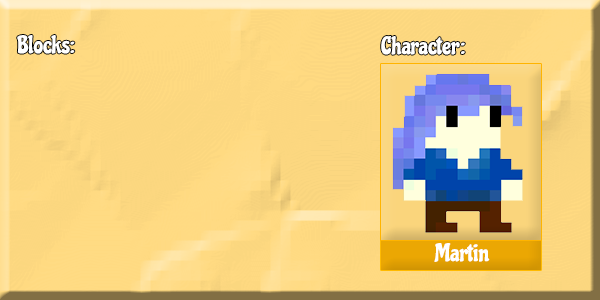
<style>
.page{position:relative;width:600px;height:300px}
.page>*{position:absolute;margin:0}
.t1{font:24.2px "Chicle-Regular";color:#ffffff}
</style>
<div class="page">
<p class="t1" style="left:17px;top:35px;width:58px;height:19px">Blocks:</p>
<p class="t1" style="left:381px;top:36px;width:84px;height:19px">Character:</p>
<p class="t1" style="left:434px;top:243px;width:56px;height:19px">Martin</p>
</div>
